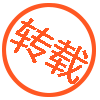
<style>
.page{position:relative;width:100px;height:100px;background:#ffffff}
.page>*{position:absolute;margin:0}
.t1{font:38.8px "MicrosoftYaHei";color:#ff5722;font-weight:bold}
</style>
<div class="page">
<p class="t1" style="left:10px;top:18px;width:78px;height:66px;rotate:29deg">转载</p>
</div>
